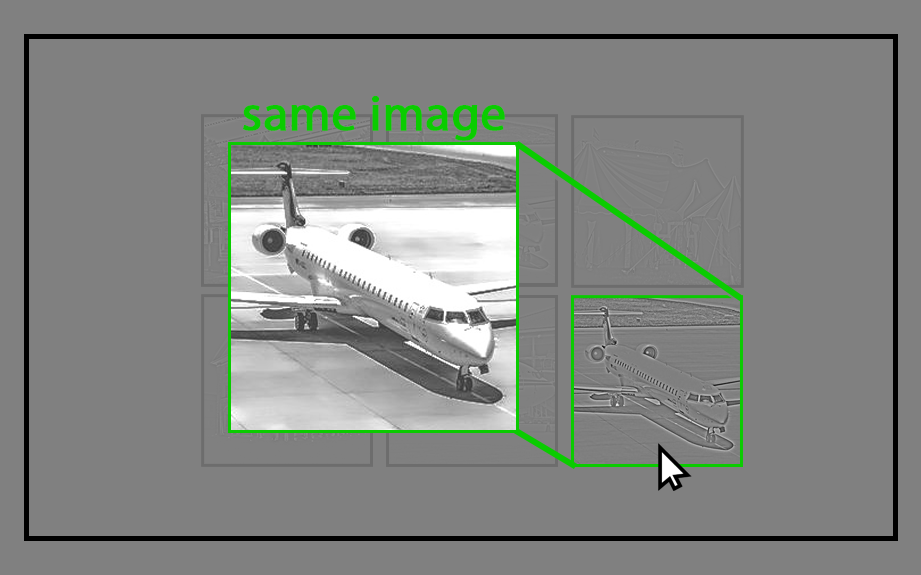
<style>
.page{position:relative;width:921px;height:575px;background:#808080}
.page>*{position:absolute;margin:0}
.t1{font:50px "MyriadPro-Regular";color:#0acc00;font-weight:bold}
</style>
<div class="page">
<p class="t1" style="left:243px;top:96px;width:262px;height:45px">same image</p>
</div>
